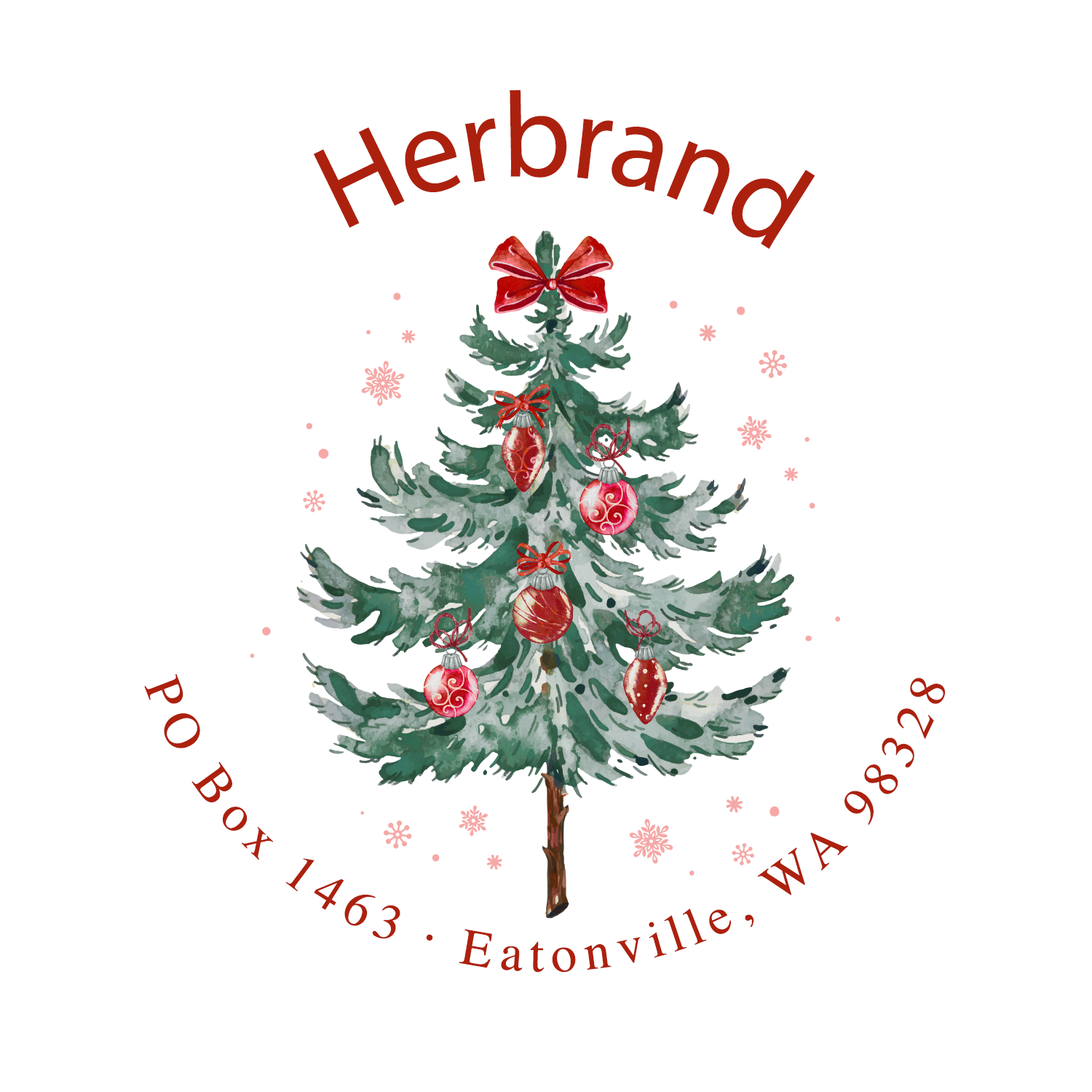
<style>
.page{position:relative;width:1092px;height:1092px;background:#ffffff}
.page>*{position:absolute;margin:0}
.t1{font:121.3px "MyriadPro-Regular";letter-spacing:-0.025em;color:#ac210e}
.t2{font:51.6px "Times-Roman";letter-spacing:0.066em;color:#ac210e}
</style>
<div class="page">
<p class="t1" style="left:314px;top:90px;width:501px;height:159px;rotate:3deg">Herbrand</p>
<p class="t2" style="left:144px;top:674px;width:801px;height:299px;rotate:-6deg">PO Box 1463 · Eatonville, WA 98328</p>
</div>
